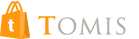
<style>
.page{position:relative;width:139px;height:39px;background:#ffffff}
.page>*{position:absolute;margin:0}
.t1{font:22px "TrajanPro-Regular";letter-spacing:0.04em;color:#b4b1ab;scale:1.04 1}
.t2{font:24px "TrajanPro-Bold";letter-spacing:0.04em;color:#fe980f;scale:1.04 1}
.t3{font:16px "Krungthep";letter-spacing:0.04em;color:#ffffff;scale:1.04 1}
</style>
<div class="page">
<p class="t1" style="left:38px;top:15px;width:88px;height:20px"><span class="t2">T</span>OMIS</p>
<p class="t3" style="left:8px;top:19px;width:6px;height:13px">t</p>
</div>
